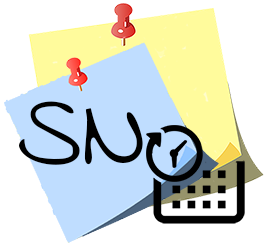
<style>
.page{position:relative;width:271px;height:250px;background:#ffffff}
.page>*{position:absolute;margin:0}
.t1{font:104.2px "IndieFlower";color:#000000}
</style>
<div class="page">
<p class="t1" style="left:19px;top:101px;width:124px;height:64px">SN</p>
</div>
